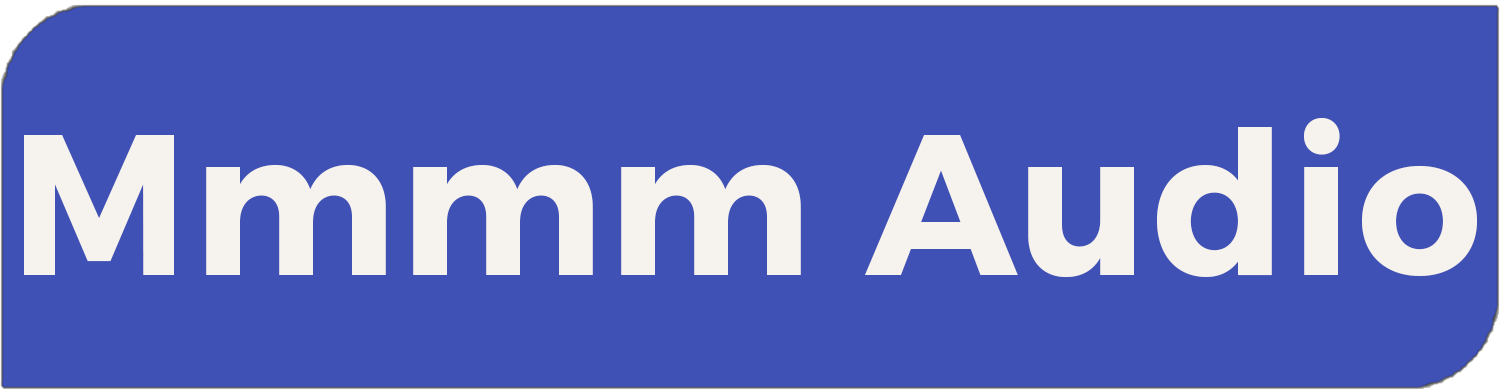
<style>
.page{position:relative;width:1500px;height:390px;background:#3f51b5}
.page>*{position:absolute;margin:0}
.t1{font:200px "Montserrat-Bold";letter-spacing:0.025em;color:#f6f3ee}
</style>
<div class="page">
<p class="t1" style="left:24px;top:118px;width:1453px;height:160px">Mmmm Audio</p>
</div>
